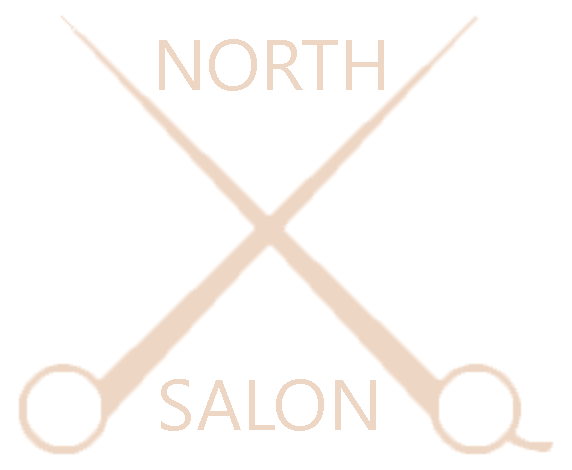
<style>
.page{position:relative;width:572px;height:470px;background:#ffffff}
.page>*{position:absolute;margin:0}
.t1{font:72px "SegoeUIHistoric";color:#eed6c4}
</style>
<div class="page">
<p class="t1" style="left:159px;top:39px;width:225px;height:52px">NORTH</p>
<p class="t1" style="left:161px;top:379px;width:215px;height:52px">SALON</p>
</div>
